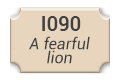
<style>
.page{position:relative;width:119px;height:80px;background:#e7d6bd}
.page>*{position:absolute;margin:0}
.t1{font:16px/14px "Roboto-Italic";color:#414040}
</style>
<div class="page">
<p class="t1" style="left:29px;top:36px;width:61px;height:28px;text-align:center">A fearful<br>lion</p>
</div>
